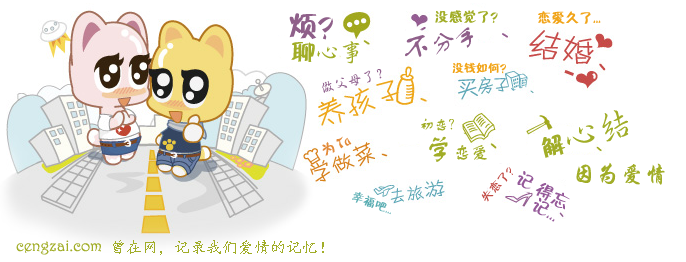
<style>
.page{position:relative;width:686px;height:262px;background:#ffffff}
.page>*{position:absolute;margin:0}
.t1{font:30px "Ftiebihei";color:#8f608a}
.t2{font:14px "Ftiebihei";color:#a1ad27}
.t3{font:14px "Ftiebihei";color:#f1a418}
.t4{font:24px "FZSTK--GBK1-0";color:#8f608a}
.t5{font:30px "FZSTK--GBK1-0";color:#8f608a}
.t6{font:24px "¾­µäÐÐÊé¼ò Regular";color:#a1ad27}
.t7{font:24px "Ftiebihei";color:#a1ad27}
.t8{font:12px "Ftiebihei";color:#f1a418}
.t9{font:14px "¾­µäÐÐÊé¼ò Regular";color:#92638f}
.t10{font:36px "¾­µäÐÐÊé¼ò Regular";color:#a1ad27}
.t11{font:14px "FZSTK--GBK1-0";color:#a1ad27}
.t12{font:14px "Ftiebihei";color:#e28b3b}
.t13{font:18px "FZSTK--GBK1-0";color:#a1ad27}
.t14{font:30px "FZSTK--GBK1-0";color:#a1ad27}
.t15{font:12px "Ftiebihei";color:#c24b45}
.t16{font:18px/7.6px "Ftiebihei";color:#955999}
.t17{font:24px "ç»å¸è¡æ¥·ç®-regular";color:#a1ad27}
.t18{font:12px "Ftiebihei";color:#57acb1}
.t19{font:16px "Harrington";color:#a1ad27}
.t20{font:16px "¿¬Ìå";color:#a1ad27}
</style>
<div class="page">
<p class="t1" style="left:289px;top:13px;width:44px;height:27px">烦？</p>
<p class="t2" style="left:435px;top:10px;width:63px;height:13px">没感觉了？</p>
<p class="t3" style="left:538px;top:11px;width:63px;height:13px">恋爱久了...</p>
<p class="t4" style="left:405px;top:27px;width:69px;height:30px;rotate:-13deg"><span class="t5">不</span>分手</p>
<p class="t6" style="left:291px;top:41px;width:69px;height:23px"><span class="t7">聊</span>心事</p>
<p class="t8" style="left:452px;top:62px;width:54px;height:12px">没钱如何？</p>
<p class="t9" style="left:322px;top:69px;width:60px;height:24px;rotate:-14deg">做父母了？</p>
<p class="t10" style="left:541px;top:110px;width:88px;height:48px;rotate:-16deg"><span class="t7">解</span>心结</p>
<p class="t11" style="left:421px;top:118px;width:33px;height:13px">初恋？</p>
<p class="t12" style="left:322px;top:136px;width:30px;height:20px;rotate:-23deg">为 Ta</p>
<p class="t13" style="left:429px;top:136px;width:58px;height:26px"><span class="t14">学</span>恋爱</p>
<p class="t15" style="left:481px;top:167px;width:32px;height:35px;rotate:-48deg">失恋了？</p>
<p class="t16" style="left:517px;top:171px;width:53px;height:51px;rotate:30deg">记 得忘<br>      记...</p>
<p class="t17" style="left:576px;top:162px;width:89px;height:23px">因为爱情</p>
<p class="t18" style="left:352px;top:192px;width:39px;height:23px;rotate:21deg">幸福吧...</p>
<p class="t19" style="left:16px;top:240px;width:85px;height:15px">cengzai.com</p>
<p class="t20" style="left:113px;top:240px;width:211px;height:15px">曾在网，记录我们爱情的记忆！</p>
</div>
